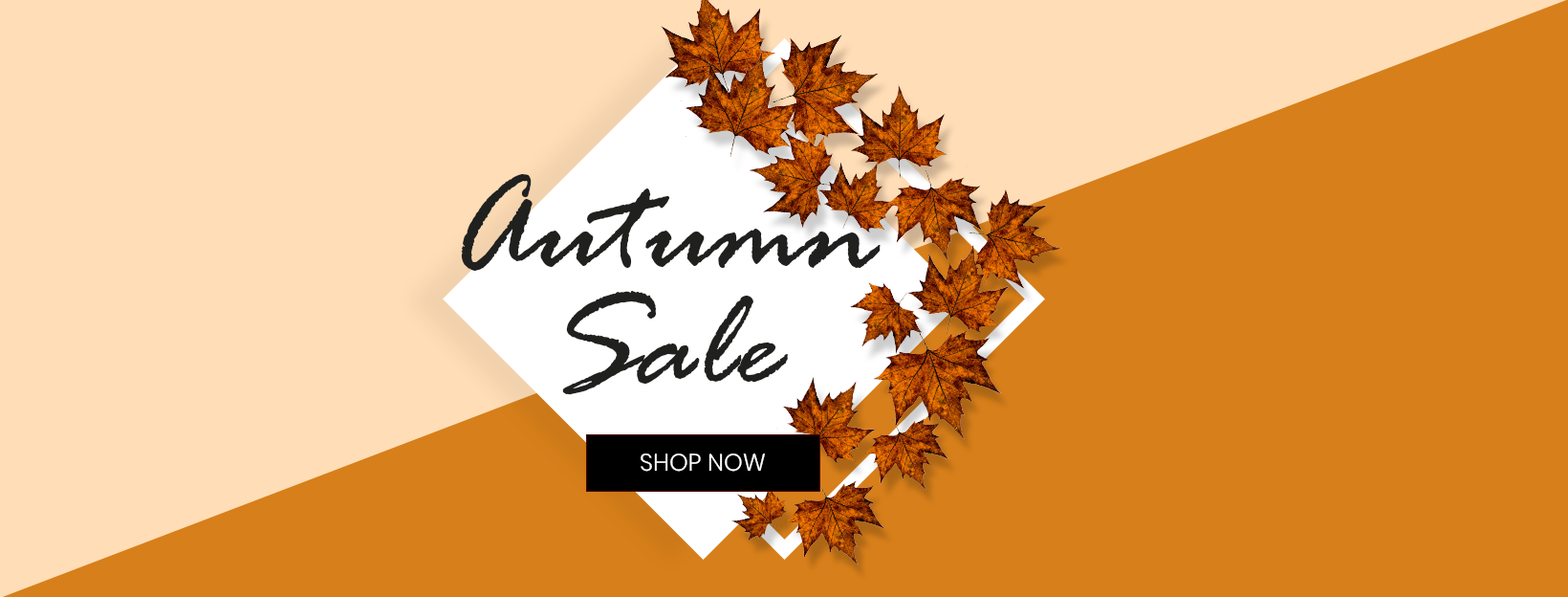
<style>
.page{position:relative;width:1568px;height:597px;background:#d77f1a}
.page>*{position:absolute;margin:0}
.t1{font:143.4px/114.7px "RageItalic";color:#20201f}
.t2{font:23.9px "Poppins-Light";color:#ffffff}
</style>
<div class="page">
<p class="t1" style="left:461px;top:174px;width:420px;height:221px;text-align:center">Autumn<br>Sale</p>
<p class="t2" style="left:641px;top:453px;width:124px;height:18px">SHOP NOW</p>
</div>
